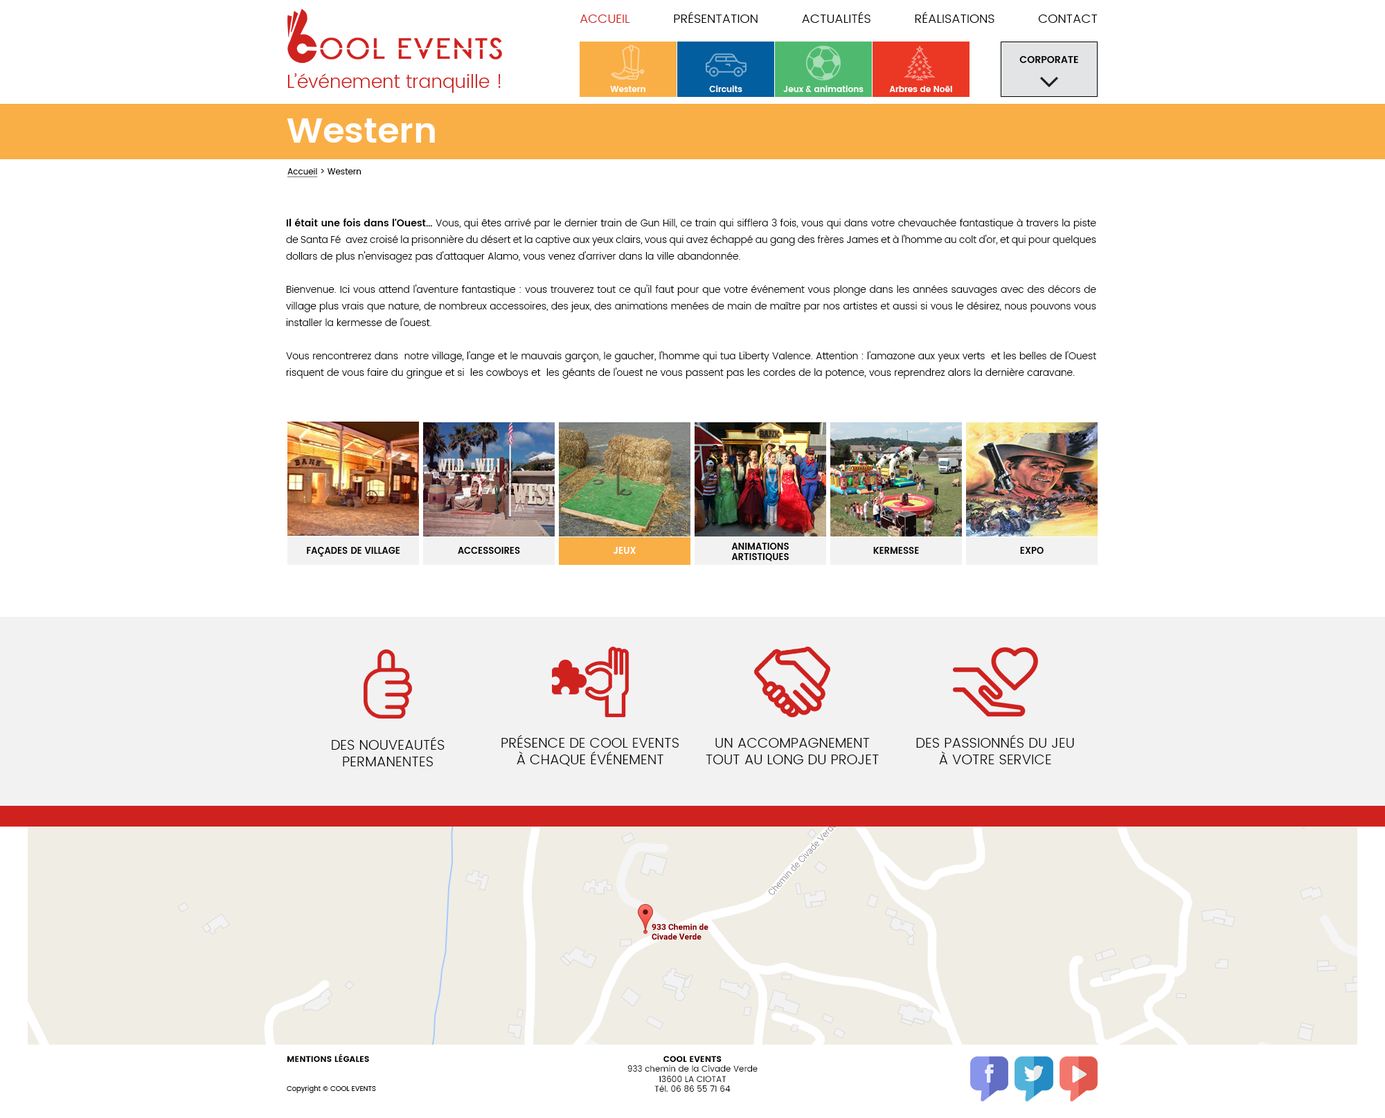
<style>
.page{position:relative;width:1385px;height:1118px;background:#ffffff}
.page>*{position:absolute;margin:0}
.t1{font:12.5px "Poppins-Light";color:#000000;text-transform:uppercase}
.t2{font:12.5px "Poppins-Light";color:#cf221f;text-transform:uppercase}
.t3{font:9.7px "Poppins-SemiBold";color:#000000}
.t4{font:18.7px "Poppins-Light";color:#cf211e}
.t5{font:8.3px "Poppins-SemiBold";color:#ffffff}
.t6{font:34.6px "Poppins-SemiBold";color:#ffffff}
.t7{font:8.3px "Poppins-Regular";color:#000000}
.t8{font:8.3px "Poppins-Regular";color:#000000;text-decoration:underline}
.t9{font:9.7px/16.6px "Poppins-Light";color:#000000}
.t10{font:9.7px/16.6px "Poppins-SemiBold";color:#000000}
.t11{font:9px "Poppins-SemiBold";color:#000000;text-transform:uppercase}
.t12{font:9px "Poppins-SemiBold";color:#ffffff;text-transform:uppercase}
.t13{font:13.8px "Poppins-Light";color:#000000;text-transform:uppercase}
.t14{font:8.3px "Poppins";color:#000000;text-transform:uppercase}
.t15{font:6.9px "Poppins-Regular";color:#000000}
</style>
<div class="page">
<p class="t1" style="left:579px;top:12px;width:518px;height:11px"><span class="t2">accueil </span>Présentation Actualités Réalisations Contact</p>
<p class="t3" style="left:1019px;top:56px;width:59px;height:7px">CORPORATE</p>
<p class="t4" style="left:287px;top:73px;width:214px;height:20px">L’événement tranquille !</p>
<p class="t5" style="left:610px;top:86px;width:35px;height:6px">Western</p>
<p class="t5" style="left:709px;top:85px;width:33px;height:7px">Circuits</p>
<p class="t5" style="left:783px;top:85px;width:80px;height:7px">Jeux &amp; animations</p>
<p class="t5" style="left:889px;top:86px;width:63px;height:6px">Arbres de Noël</p>
<p class="t6" style="left:287px;top:118px;width:148px;height:25px">Western</p>
<p class="t7" style="left:287px;top:168px;width:74px;height:9px"><span class="t8">Accueil</span> &gt; Western</p>
<p class="t9" style="left:286px;top:218px;width:810px;height:161px;text-align:justify"><span class="t10">Il était une fois dans l'Ouest…</span> Vous, qui êtes arrivé par le dernier train de Gun Hill, ce train qui sifflera 3 fois, vous qui dans votre chevauchée fantastique à travers la piste de Santa Fé  avez croisé la prisonnière du désert et la captive aux yeux clairs, vous qui avez échappé au gang des frères James et à l'homme au colt d'or, et qui pour quelques dollars de plus n'envisagez pas d'attaquer Alamo, vous venez d'arriver dans la ville abandonnée.<br><br>Bienvenue. Ici vous attend l'aventure fantastique : vous trouverez tout ce qu'il faut pour que votre événement vous plonge dans les années sauvages avec des décors de village plus vrais que nature, de nombreux accessoires, des jeux, des animations menées de main de maître par nos artistes et aussi si vous le désirez, nous pouvons vous installer la kermesse de l'ouest.<br><br>Vous rencontrerez dans  notre village, l'ange et le mauvais garçon, le gaucher, l'homme qui tua Liberty Valence. Attention : l'amazone aux yeux verts  et les belles de l'Ouest risquent de vous faire du gringue et si  les cowboys et  les géants de l'ouest ne vous passent pas les cordes de la potence, vous reprendrez alors la dernière caravane.</p>
<p class="t11" style="left:731px;top:543px;width:58px;height:18px;text-align:center">Animations artistiques</p>
<p class="t11" style="left:307px;top:547px;width:93px;height:10px">Façades de village</p>
<p class="t11" style="left:458px;top:547px;width:62px;height:7px">Accessoires</p>
<p class="t12" style="left:613px;top:547px;width:23px;height:7px">Jeux</p>
<p class="t11" style="left:873px;top:547px;width:46px;height:7px">kermesse</p>
<p class="t11" style="left:1020px;top:547px;width:23px;height:7px">expo</p>
<p class="t13" style="left:332px;top:737px;width:112px;height:29px;text-align:center">des nouveautés permanentes</p>
<p class="t13" style="left:501px;top:735px;width:177px;height:31px;text-align:center">Présence de Cool Events <br>à chaque événement</p>
<p class="t13" style="left:705px;top:738px;width:174px;height:26px;text-align:center">Un accompagnement <br>tout au long du projet</p>
<p class="t13" style="left:916px;top:735px;width:158px;height:29px;text-align:center">Des passionnés du jeu <br>à votre service</p>
<p class="t14" style="left:287px;top:1054px;width:82px;height:8px">Mentions légales</p>
<p class="t7" style="left:627px;top:1056px;width:130px;height:36px;text-align:center"><span class="t14">Cool Events<br></span>933 chemin de la Civade Verde<br>13600 LA CIOTAT<br>Tél. 06 86 55 71 64</p>
<p class="t15" style="left:287px;top:1086px;width:89px;height:7px">Copyright © COOL EVENTS</p>
</div>
